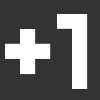
<style>
.page{position:relative;width:100px;height:100px;background:#333333}
.page>*{position:absolute;margin:0}
.t1{font:120.4px "Hooge0554";letter-spacing:-0.2em;color:#ffffff;text-transform:uppercase}
</style>
<div class="page">
<p class="t1" style="left:5px;top:14px;width:83px;height:75px">+1</p>
</div>
